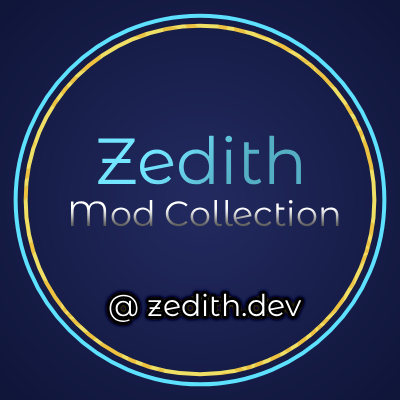
<style>
.page{position:relative;width:400px;height:400px}
.page>*{position:absolute;margin:0}
.t1{font:65px "MontserratAlternates-Regular"}
.t2{font:35px "MontserratAlternates-Regular"}
.t3{font:30px "MontserratAlternates-Regular";color:#ffffff}
</style>
<div class="page">
<p class="t1" style="left:98px;top:135px;width:203px;height:50px">Zedith</p>
<p class="t2" style="left:70px;top:200px;width:269px;height:27px">Mod Collection</p>
<p class="t3" style="left:109px;top:293px;width:193px;height:29px">@ zedith.dev</p>
</div>
